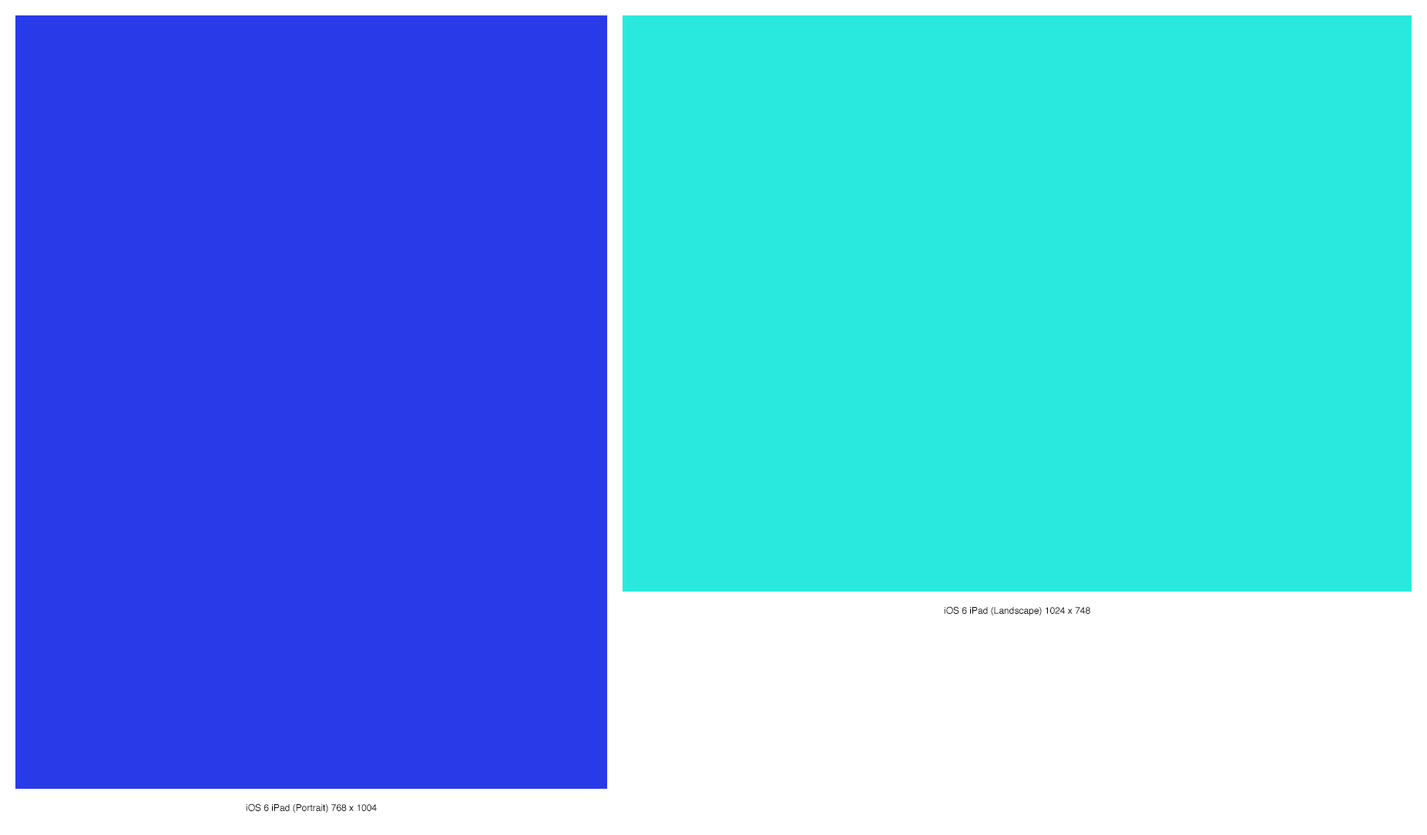
<style>
.page{position:relative;width:1427px;height:835px;background:#29e9de}
.page>*{position:absolute;margin:0}
.t1{font:9.2px "Helvetica";color:#000000}
</style>
<div class="page">
<p class="t1" style="left:944px;top:607px;width:147px;height:10px">iOS 6 iPad (Landscape) 1024 x 748</p>
<p class="t1" style="left:246px;top:804px;width:131px;height:9px">iOS 6 iPad (Portrait) 768 x 1004</p>
</div>
